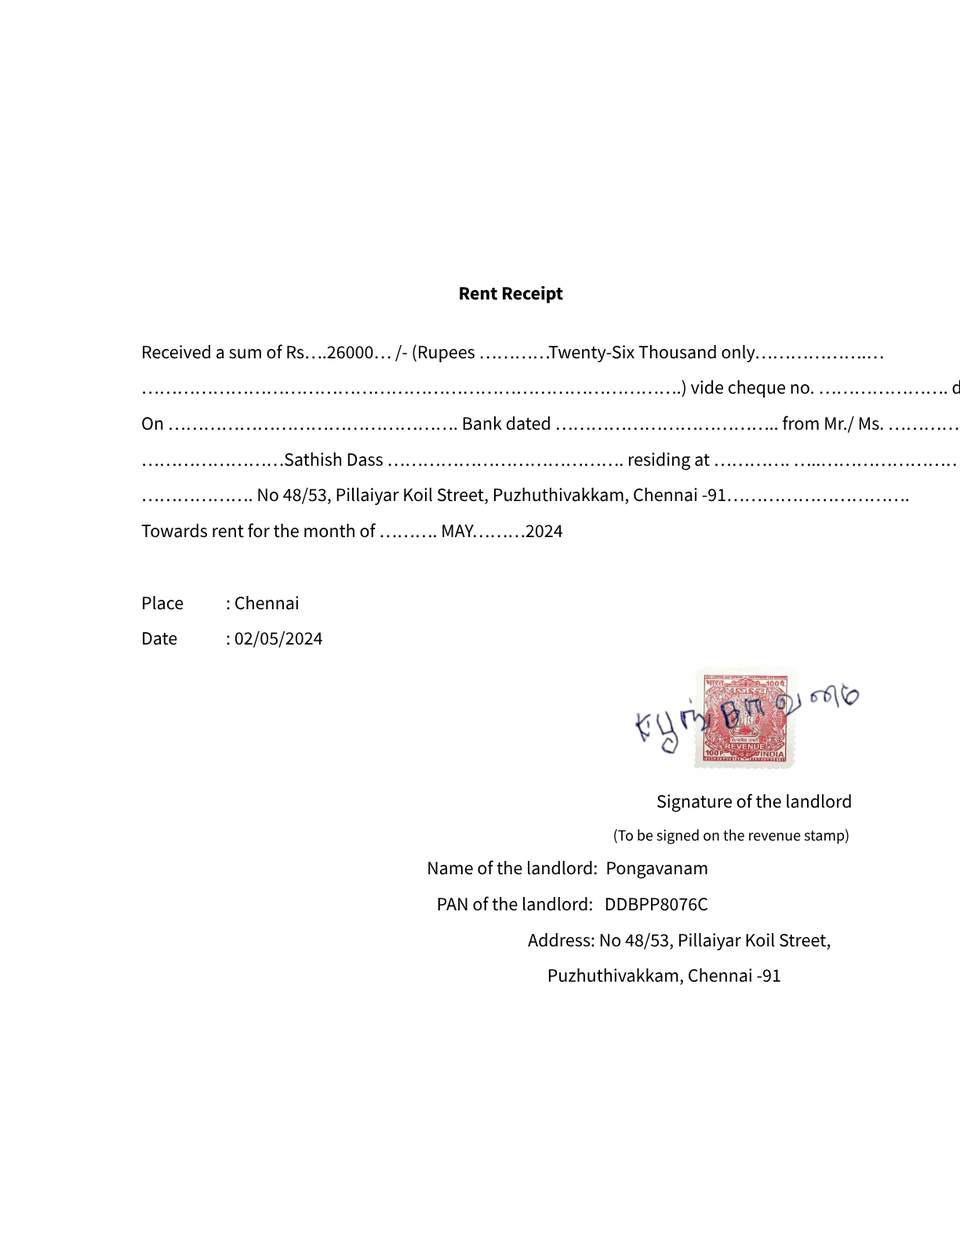
<style>
.page{position:relative;width:960px;height:1242px;background:#ffffff}
.page>*{position:absolute;margin:0}
.t1{font:18.8px "Calibri-Bold";color:#000000}
.t2{font:18.8px "Calibri";color:#000000}
.t3{font:18.8px "Calibri";letter-spacing:0.004em;color:#000000}
.t4{font:18.8px "Calibri";letter-spacing:0.005em;color:#000000}
.t5{font:18.8px "Calibri";letter-spacing:0.001em;color:#000000}
.t6{font:15.7px "Calibri";color:#000000}
.t7{font:15.7px "Calibri";letter-spacing:-0.004em;color:#000000}
</style>
<div class="page">
<p class="t1" style="left:460px;top:285px;width:103px;height:19px">Rent Receipt</p>
<p class="t2" style="left:143px;top:344px;width:740px;height:19px">Received a sum of Rs….26000… /- (Rupees …………Twenty-Six Thousand only……………….…</p>
<p class="t2" style="left:143px;top:487px;width:766px;height:19px">………………. No 48/53, Pillaiyar Koil Street, Puzhuthivakkam, Chennai -<span class="t3">91</span>………………………….</p>
<p class="t2" style="left:141px;top:523px;width:422px;height:15px">Towards rent for the month of ………. MAY………20<span class="t3">24</span></p>
<p class="t2" style="left:143px;top:595px;width:41px;height:15px">Place</p>
<p class="t2" style="left:227px;top:595px;width:72px;height:15px">: Chennai</p>
<p class="t2" style="left:143px;top:632px;width:34px;height:13px">Date</p>
<p class="t2" style="left:227px;top:631px;width:95px;height:17px">: 02<span class="t4">/0</span>5<span class="t4">/2</span>024</p>
<p class="t2" style="left:657px;top:794px;width:194px;height:18px"><span class="t5"><br>Si</span>gnature of the landlord</p>
<p class="t6" style="left:614px;top:829px;width:235px;height:16px">(To be signed on the rev<span class="t7">en</span>ue stamp)</p>
<p class="t2" style="left:428px;top:860px;width:279px;height:19px">Name of the landlord:  Pongavanam</p>
<p class="t2" style="left:438px;top:896px;width:270px;height:15px">PAN of the landlord:   DDBPP8076C</p>
<p class="t2" style="left:528px;top:932px;width:303px;height:19px">Address: No 48/53, Pillaiyar Koil Street,</p>
<p class="t2" style="left:548px;top:968px;width:232px;height:18px"><span class="t4">  </span>                                                                                                            Puzhuthivakkam, Chennai -<span class="t3">91</span></p>
</div>
